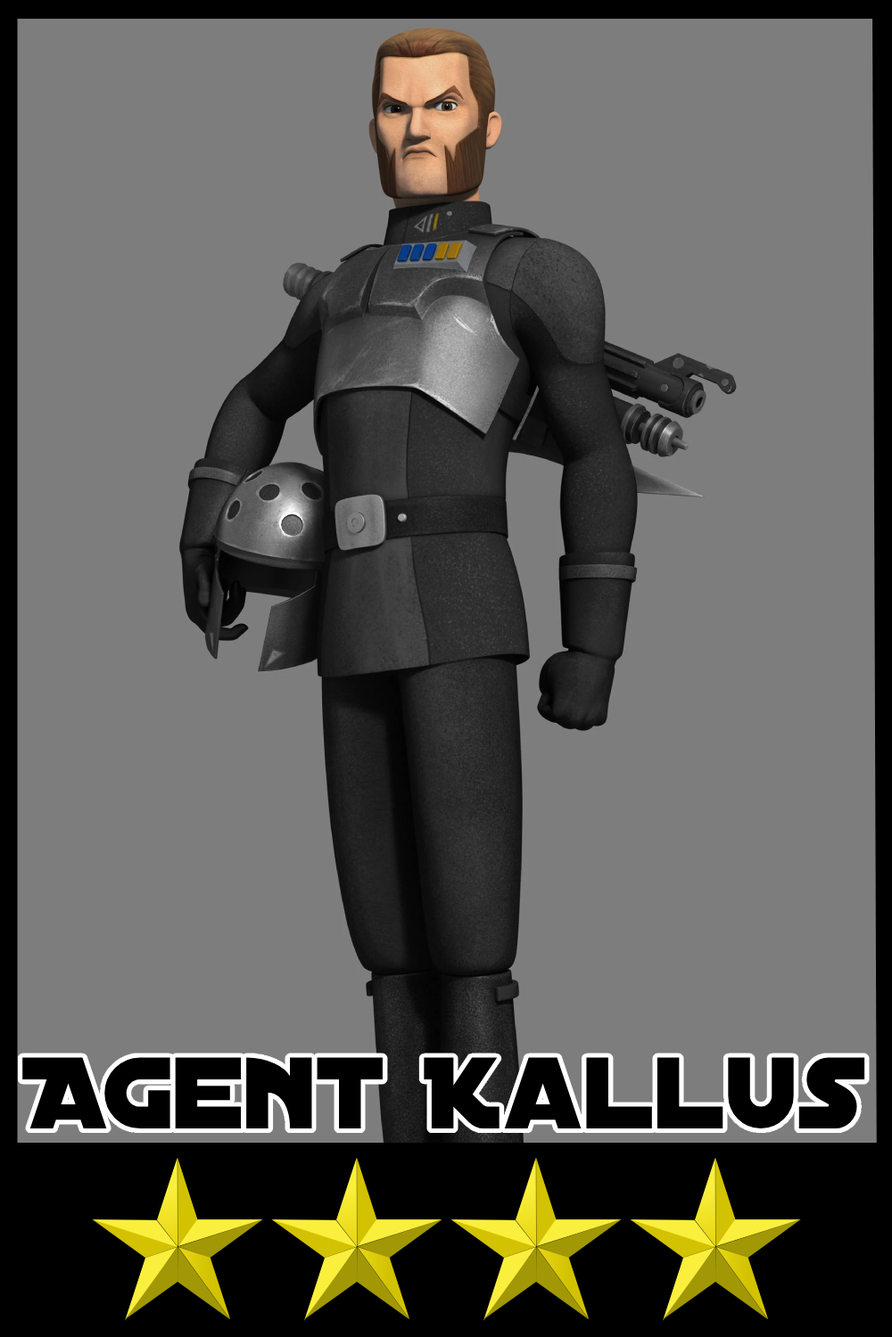
<style>
.page{position:relative;width:892px;height:1337px;background:#7d7d7d}
.page>*{position:absolute;margin:0}
.t1{font:109px "DistantGalaxy";color:#000000}
</style>
<div class="page">
<p class="t1" style="left:22px;top:1057px;width:843px;height:72px">Agent Kallus</p>
</div>
